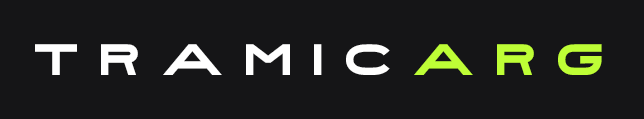
<style>
.page{position:relative;width:644px;height:119px;background:#151517}
.page>*{position:absolute;margin:0}
.t1{font:61.3px "helssanserif";color:#ffffff}
.t2{font:61.3px "helssanserif";color:#befe36}
</style>
<div class="page">
<p class="t1" style="left:35px;top:44px;width:567px;height:31px">tramic<span class="t2">ARG</span></p>
</div>
